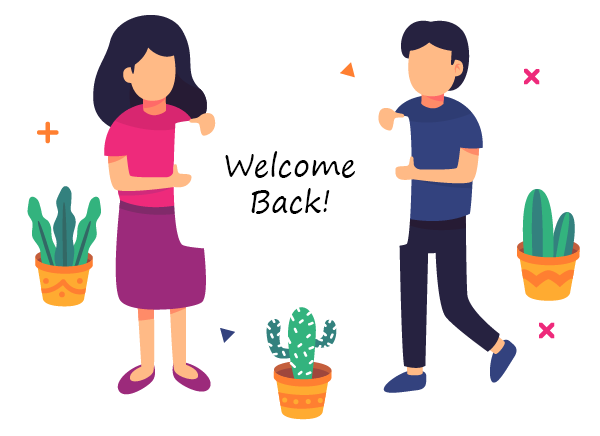
<style>
.page{position:relative;width:600px;height:436px;background:#ffffff}
.page>*{position:absolute;margin:0}
.t1{font:30px "SegoePrint";color:#000000}
</style>
<div class="page">
<p class="t1" style="left:225px;top:151px;width:130px;height:63px;text-align:center">Welcome<br>Back!</p>
</div>
